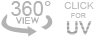
<style>
.page{position:relative;width:100px;height:37px;background:#ffffff}
.page>*{position:absolute;margin:0}
.t1{font:20px "ArialMT";color:#c0c0c0}
.t2{font:10px "ArialMT";color:#c0c0c0;text-transform:uppercase}
.t3{font:7.2px "ArialMT";color:#c0c0c0;text-transform:uppercase}
.t4{font:18px "ArialMT";font-weight:bold}
</style>
<div class="page">
<p class="t1" style="left:11px;top:1px;width:40px;height:15px">360°</p>
<p class="t2" style="left:64px;top:2px;width:30px;height:7px">click</p>
<p class="t3" style="left:71px;top:13px;width:15px;height:5px">for</p>
<p class="t4" style="left:66px;top:21px;width:26px;height:14px">UV</p>
</div>
